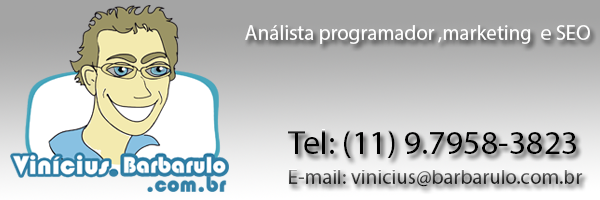
<style>
.page{position:relative;width:600px;height:200px}
.page>*{position:absolute;margin:0}
.t1{font:21.2px "MyriadPro-Regular";color:#ffffff}
.t2{font:34px "MyriadPro-Regular";color:#000000}
.t3{font:21.2px "MyriadPro-Regular"}
</style>
<div class="page">
<p class="t1" style="left:245px;top:25px;width:190px;height:19px">Análista programador</p>
<p class="t1" style="left:438px;top:25px;width:152px;height:19px">,marketing  e SEO</p>
<p class="t2" style="left:288px;top:129px;width:288px;height:29px">Tel: (11) 9.7958-3823</p>
<p class="t3" style="left:289px;top:169px;width:294px;height:18px">E-mail: vinicius@barbarulo.com.br</p>
</div>
